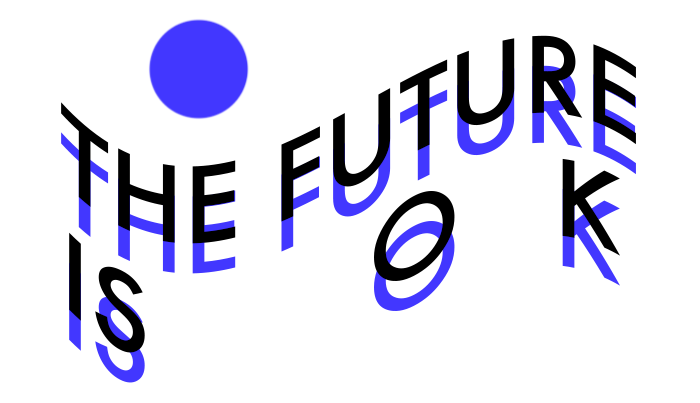
<style>
.page{position:relative;width:700px;height:403px;background:#ffffff}
.page>*{position:absolute;margin:0}
.t1{font:101.6px "Futura-Medium";color:#000000}
.t2{font:101.6px "Futura-Medium"}
</style>
<div class="page">
<p class="t1" style="left:61px;top:35px;width:575px;height:318px">THE FUTURE IS       O   K</p>
<p class="t2" style="left:61px;top:65px;width:575px;height:318px">THE FUTURE IS       O   K</p>
</div>
